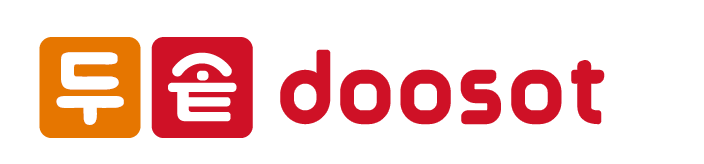
<style>
.page{position:relative;width:704px;height:164px;background:#ffffff}
.page>*{position:absolute;margin:0}
.t1{font:80px "HSGaeulSenggak-2.0";letter-spacing:0.06em;color:#cf1126;font-weight:bold}
</style>
<div class="page">
<p class="t1" style="left:282px;top:51px;width:321px;height:72px">doosot</p>
</div>
